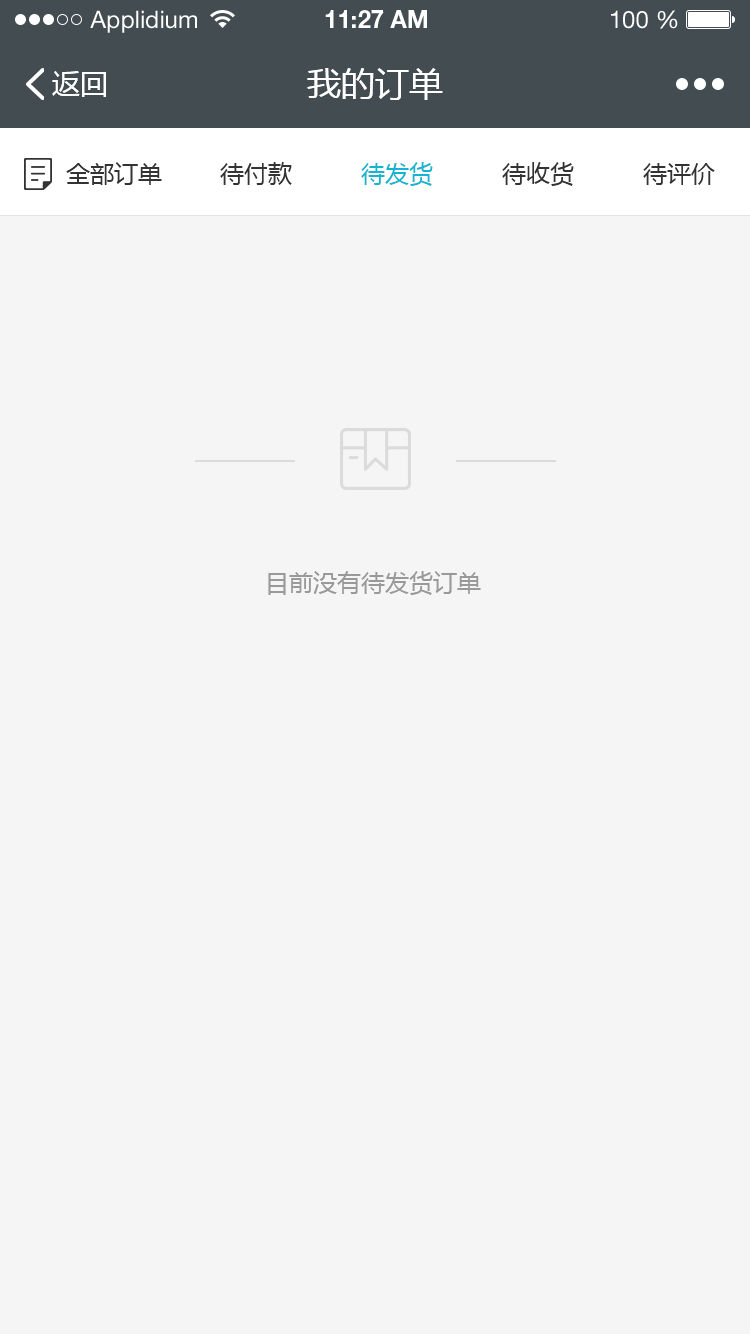
<style>
.page{position:relative;width:750px;height:1334px;background:#f5f5f5}
.page>*{position:absolute;margin:0}
.t1{font:24px "HelveticaNeueLTStd-Roman";color:#ffffff}
.t2{font:24px "HelveticaNeueLTStd-Bd";color:#ffffff}
.t3{font:28px "MicrosoftYaHei";color:#ffffff}
.t4{font:34px "MicrosoftYaHei";color:#ffffff}
.t5{font:24px "MicrosoftYaHei";color:#333333}
.t6{font:24px "MicrosoftYaHei";color:#15b4d0}
.t7{font:24px "MicrosoftYaHei";color:#999999}
</style>
<div class="page">
<p class="t1" style="left:90px;top:10px;width:107px;height:23px">Applidium</p>
<p class="t2" style="left:325px;top:10px;width:102px;height:18px">11:27 AM</p>
<p class="t1" style="left:611px;top:10px;width:67px;height:19px">100 %</p>
<p class="t3" style="left:52px;top:71px;width:54px;height:26px">返回</p>
<p class="t4" style="left:307px;top:68px;width:136px;height:32px">我的订单</p>
<p class="t5" style="left:66px;top:162px;width:96px;height:23px">全部订单</p>
<p class="t5" style="left:220px;top:162px;width:72px;height:23px">待付款</p>
<p class="t6" style="left:361px;top:162px;width:72px;height:24px">待发货</p>
<p class="t5" style="left:502px;top:162px;width:72px;height:24px">待收货</p>
<p class="t5" style="left:643px;top:163px;width:72px;height:22px">待评价</p>
<p class="t7" style="left:268px;top:571px;width:213px;height:24px">目前没有待发货订单</p>
</div>
